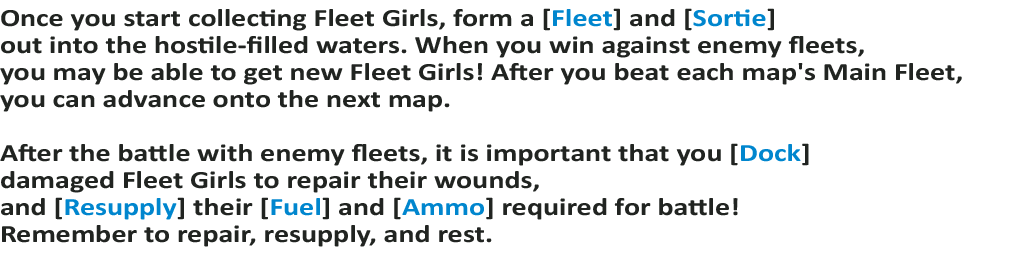
<style>
.page{position:relative;width:1024px;height:256px;background:#ffffff}
.page>*{position:absolute;margin:0}
.t1{font:25px/27px "Calibri-Bold";color:#212421;scale:1.2 1}
.t2{font:25px/27px "Calibri-Bold";color:#0086ce;scale:1.2 1}
</style>
<div class="page">
<p class="t1" style="left:0px;top:8px;width:962px;height:239px">Once you start collecting Fleet Girls, form a [<span class="t2">Fleet</span>] and [<span class="t2">Sortie</span>] <br>out into the hostile-filled waters. When you win against enemy fleets, <br>you may be able to get new Fleet Girls! After you beat each map's Main Fleet, <br>you can advance onto the next map.<br><br>After the battle with enemy fleets, it is important that you [<span class="t2">Dock</span>] <br>damaged Fleet Girls to repair their wounds, <br>and [<span class="t2">Resupply</span>] their [<span class="t2">Fuel</span>] and [<span class="t2">Ammo</span>] required for battle!<br>Remember to repair, resupply, and rest.</p>
</div>
